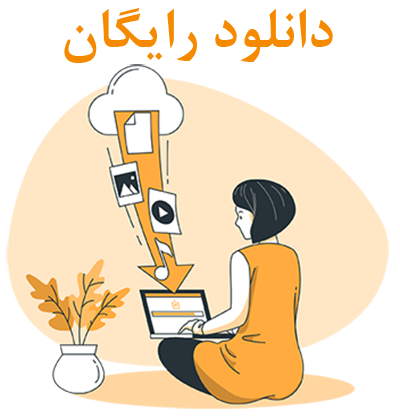
<style>
.page{position:relative;width:400px;height:418px;background:#ffffff}
.page>*{position:absolute;margin:0}
.t1{font:61.3px "BNazaninBold";color:#f58a01}
</style>
<div class="page">
<p class="t1" style="left:64px;top:8px;width:269px;height:55px">دانلود رایگان</p>
</div>
